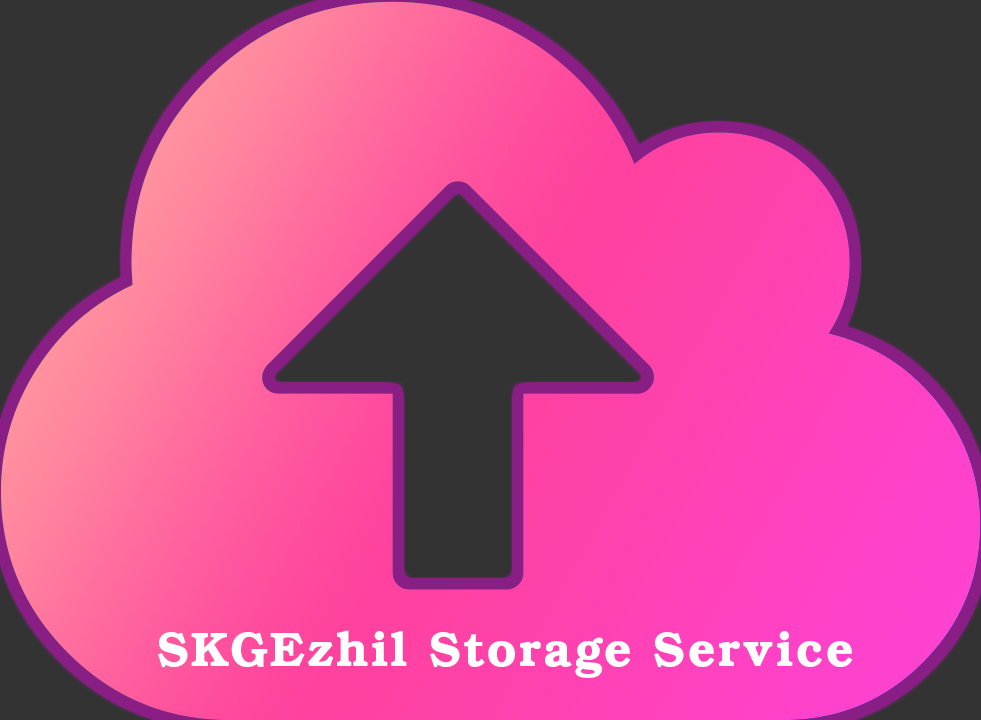
<style>
.page{position:relative;width:981px;height:720px;background:#333333}
.page>*{position:absolute;margin:0}
.t1{font:48px "URWBookman-Demi";letter-spacing:0.05em;color:#ffffff}
</style>
<div class="page">
<p class="t1" style="left:158px;top:630px;width:695px;height:48px">SKGEzhil Storage Service</p>
</div>
